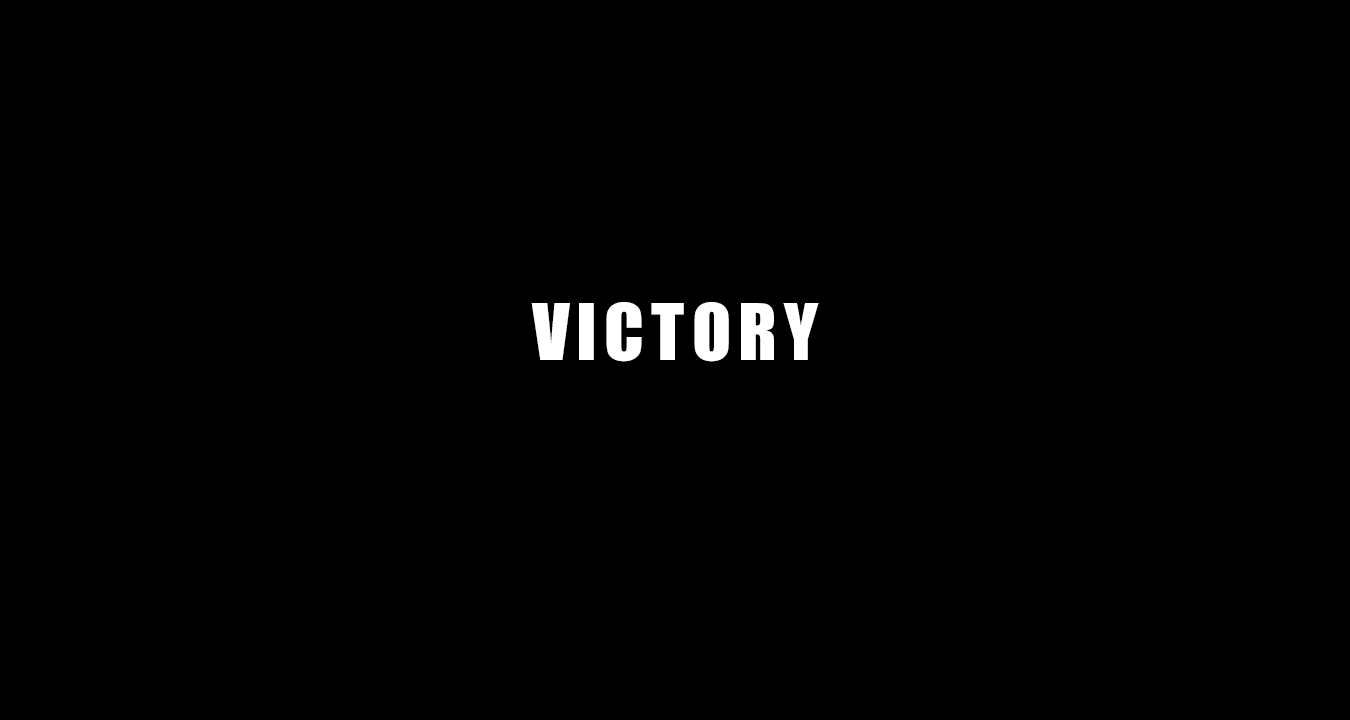
<style>
.page{position:relative;width:1350px;height:720px;background:#000000}
.page>*{position:absolute;margin:0}
.t1{font:72px "Impact";letter-spacing:0.1em;color:#ffffff}
</style>
<div class="page">
<p class="t1" style="left:531px;top:302px;width:288px;height:60px">VICTORY</p>
</div>
